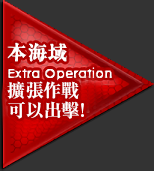
<style>
.page{position:relative;width:154px;height:171px;background:#333333}
.page>*{position:absolute;margin:0}
.t1{font:18px/20px "RyuminPr6N-ExBold";color:#ffffff}
</style>
<div class="page">
<p class="t1" style="left:7px;top:81px;width:77px;height:38px">擴張作戰<br>可以出擊!</p>
</div>
